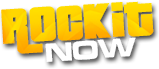
<style>
.page{position:relative;width:159px;height:69px;background:#ffffff}
.page>*{position:absolute;margin:0}
.t1{font:54.2px "Pricedown";letter-spacing:-0.01em;color:#ffd000;text-transform:uppercase}
.t2{font:27.1px "MicrogrammaD-BoldExte";letter-spacing:-0.01em;color:#ffffff;text-transform:uppercase}
</style>
<div class="page">
<p class="t1" style="left:1px;top:1px;width:153px;height:53px;rotate:-4deg">ROCKIT</p>
<p class="t2" style="left:45px;top:37px;width:91px;height:25px;rotate:-4deg">NOW</p>
</div>
